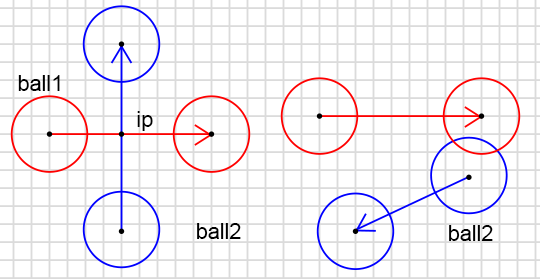
<style>
.page{position:relative;width:540px;height:279px;background:#ffffff}
.page>*{position:absolute;margin:0}
.t1{font:21.6px "ArialMT";color:#000000}
</style>
<div class="page">
<p class="t1" style="left:18px;top:75px;width:42px;height:16px">ball1</p>
<p class="t1" style="left:137px;top:111px;width:16px;height:20px">ip</p>
<p class="t1" style="left:197px;top:223px;width:44px;height:16px">ball2</p>
<p class="t1" style="left:449px;top:225px;width:44px;height:16px">ball2</p>
</div>
